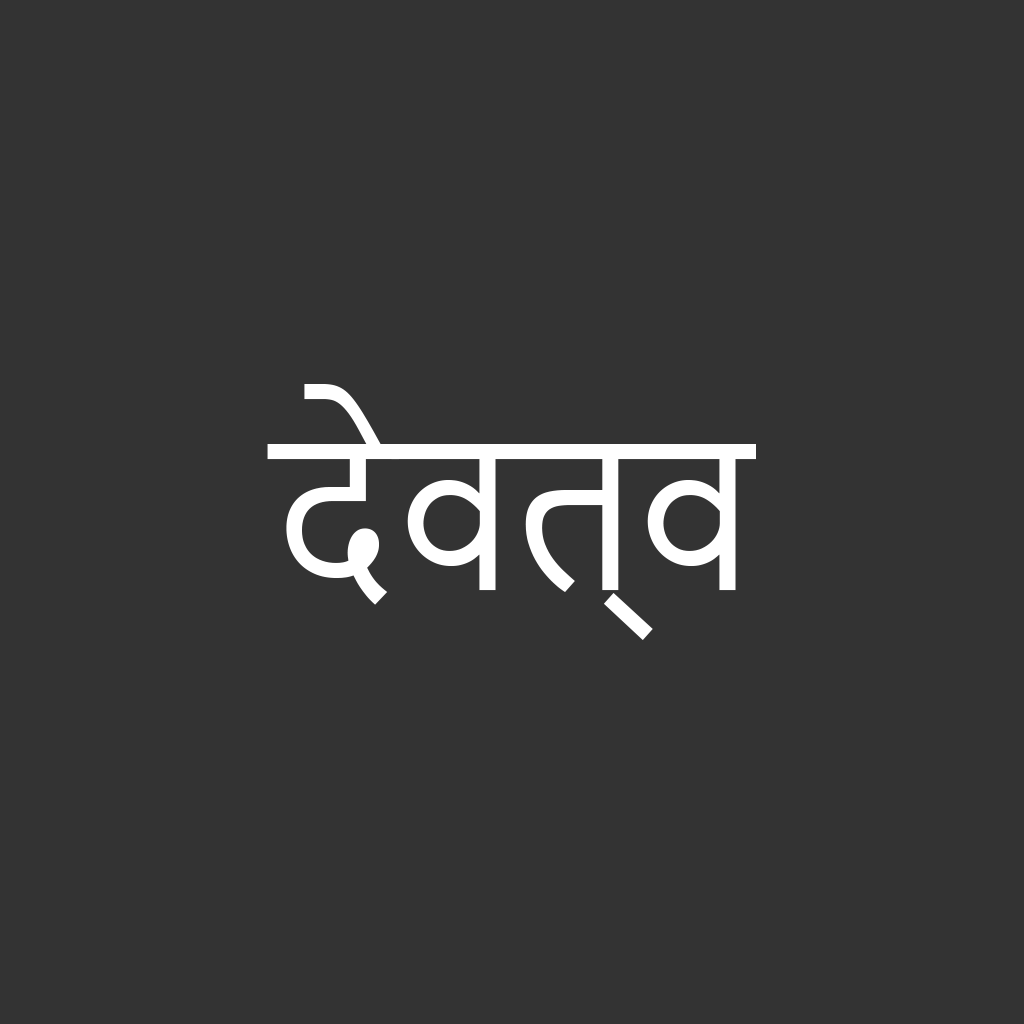
<style>
.page{position:relative;width:1024px;height:1024px;background:#333333}
.page>*{position:absolute;margin:0}
.t1{font:200px "NirmalaUI";color:#ffffff}
</style>
<div class="page">
<p class="t1" style="left:267px;top:384px;width:489px;height:256px">देवत्व</p>
</div>
